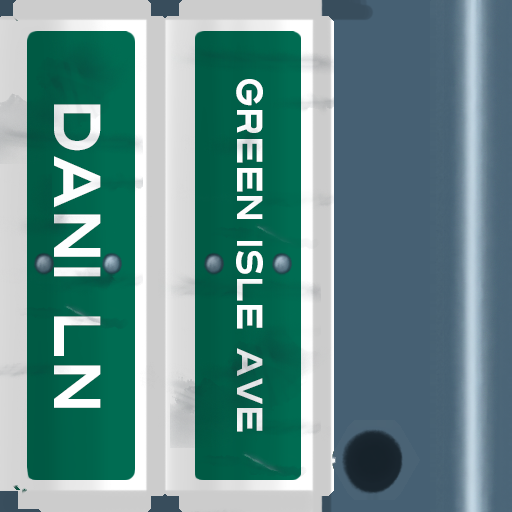
<style>
.page{position:relative;width:512px;height:512px}
.page>*{position:absolute;margin:0}
.t1{font:36px "Turnpike";color:#fefeff;scale:0.75 1}
.t2{font:66px "Turnpike";color:#fefeff;scale:0.75 1}
</style>
<div class="page">
<p class="t1" style="left:236px;top:79px;width:27px;height:353px;rotate:90deg">Green isle Ave</p>
<p class="t2" style="left:54px;top:104px;width:47px;height:304px;rotate:90deg">Dani LN</p>
</div>
